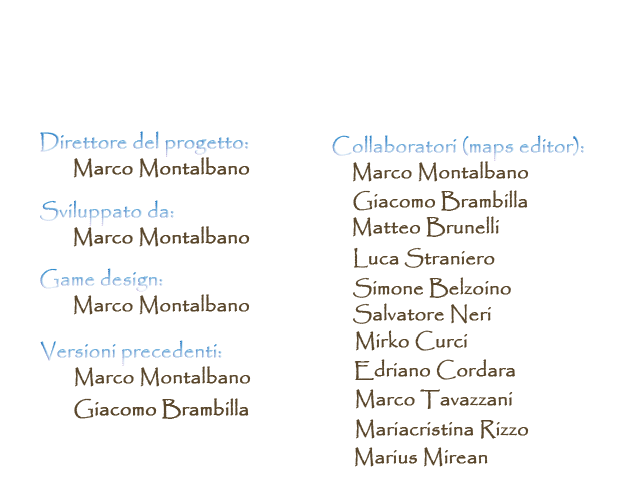
<style>
.page{position:relative;width:640px;height:480px;background:#ffffff}
.page>*{position:absolute;margin:0}
.t1{font:20px "Papyrus-Regular";font-weight:bold}
.t2{font:20px "Papyrus-Regular";color:#5a472c;font-weight:bold}
</style>
<div class="page">
<p class="t1" style="left:40px;top:131px;width:209px;height:26px">Direttore del progetto:</p>
<p class="t1" style="left:332px;top:135px;width:252px;height:26px">Collaboratori (maps editor):</p>
<p class="t2" style="left:73px;top:157px;width:177px;height:21px">Marco Montalbano</p>
<p class="t2" style="left:353px;top:161px;width:176px;height:21px">Marco Montalbano</p>
<p class="t2" style="left:353px;top:190px;width:175px;height:21px">Giacomo Brambilla</p>
<p class="t1" style="left:40px;top:200px;width:134px;height:26px">Sviluppato da:</p>
<p class="t2" style="left:353px;top:216px;width:146px;height:21px">Matteo Brunelli</p>
<p class="t2" style="left:73px;top:226px;width:177px;height:21px">Marco Montalbano</p>
<p class="t2" style="left:354px;top:247px;width:141px;height:21px">Luca Straniero</p>
<p class="t1" style="left:40px;top:268px;width:123px;height:24px">Game design:</p>
<p class="t2" style="left:353px;top:277px;width:158px;height:21px">Simone Belzoino</p>
<p class="t2" style="left:74px;top:294px;width:176px;height:21px">Marco Montalbano</p>
<p class="t2" style="left:353px;top:303px;width:138px;height:21px">Salvatore Neri</p>
<p class="t1" style="left:40px;top:340px;width:182px;height:26px">Versioni precedenti:</p>
<p class="t2" style="left:356px;top:330px;width:112px;height:21px">Mirko Curci</p>
<p class="t2" style="left:75px;top:366px;width:176px;height:21px">Marco Montalbano</p>
<p class="t2" style="left:354px;top:359px;width:161px;height:21px">Edriano Cordara</p>
<p class="t2" style="left:356px;top:389px;width:157px;height:20px">Marco Tavazzani</p>
<p class="t2" style="left:74px;top:398px;width:175px;height:21px">Giacomo Brambilla</p>
<p class="t2" style="left:356px;top:419px;width:173px;height:20px">Mariacristina Rizzo</p>
<p class="t2" style="left:355px;top:447px;width:133px;height:20px">Marius Mirean</p>
</div>
